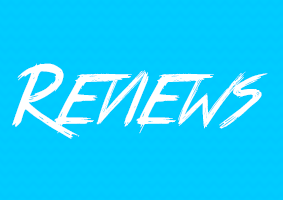
<style>
.page{position:relative;width:283px;height:200px;background:#00ccfe}
.page>*{position:absolute;margin:0}
.t1{font:72px "TrueLies";color:#ffffff}
</style>
<div class="page">
<p class="t1" style="left:12px;top:63px;width:256px;height:76px">Reviews</p>
</div>
